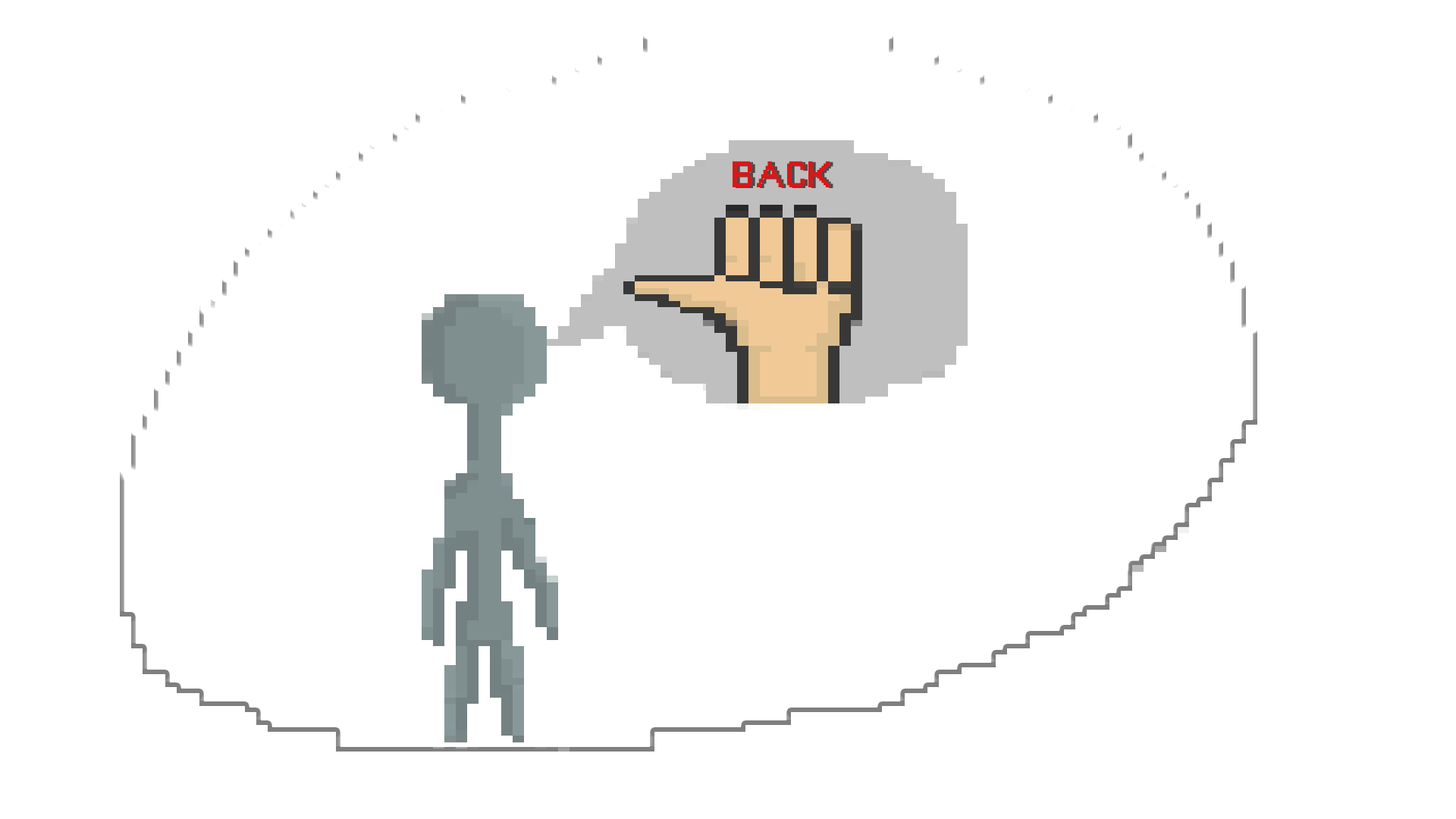
<style>
.page{position:relative;width:1456px;height:819px;background:#ffffff}
.page>*{position:absolute;margin:0}
.t1{font:34.8px "PixelGameFont";color:#d81717;text-transform:uppercase}
.t2{font:34.8px "PixelGameFont";text-transform:uppercase}
</style>
<div class="page">
<p class="t1" style="left:733px;top:161px;width:97px;height:26px">back</p>
<p class="t2" style="left:736px;top:162px;width:97px;height:26px">back</p>
</div>
